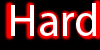
<style>
.page{position:relative;width:100px;height:50px;background:#000000}
.page>*{position:absolute;margin:0}
.t1{font:45.7px "MyriadPro-Regular";color:#ffffff}
</style>
<div class="page">
<p class="t1" style="left:11px;top:3px;width:86px;height:33px">Hard</p>
</div>
